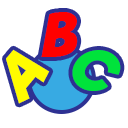
<style>
.page{position:relative;width:128px;height:128px;background:#ffffff}
.page>*{position:absolute;margin:0}
.t1{font:58.3px "RifficFree-Bold";color:#ff0000;font-style:italic}
.t2{font:58.3px "RifficFree-Bold";color:#fffc00;font-style:italic}
.t3{font:58.3px "RifficFree-Bold";color:#00e33b;font-style:italic}
</style>
<div class="page">
<p class="t1" style="left:41px;top:12px;width:37px;height:45px">B</p>
<p class="t2" style="left:6px;top:49px;width:44px;height:55px;rotate:-50deg">A</p>
<p class="t3" style="left:72px;top:50px;width:49px;height:41px;rotate:30deg">C</p>
</div>
